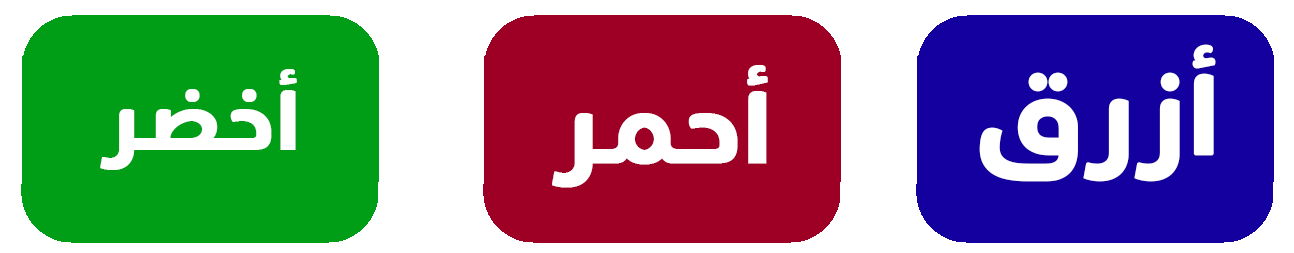
<style>
.page{position:relative;width:1294px;height:253px;background:#ffffff}
.page>*{position:absolute;margin:0}
.t1{font:107px "Du-Bold";color:#ffffff;font-weight:bold}
.t2{font:96px "Du-Bold";color:#ffffff;font-weight:bold}
.t3{font:80px "Du-Bold";color:#ffffff;font-weight:bold}
</style>
<div class="page">
<p class="t1" style="left:979px;top:44px;width:237px;height:138px">أزرق</p>
<p class="t2" style="left:552px;top:65px;width:216px;height:123px">أحمر</p>
<p class="t3" style="left:100px;top:69px;width:197px;height:101px">أخضر</p>
</div>
